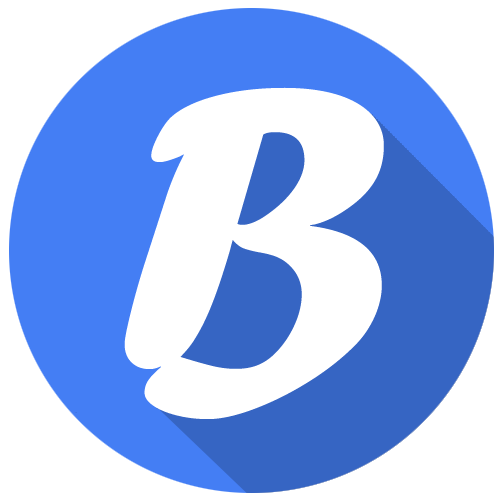
<style>
.page{position:relative;width:500px;height:500px;background:#ffffff}
.page>*{position:absolute;margin:0}
.t1{font:416.7px "ForteMT";letter-spacing:0.1em;color:#ffffff}
</style>
<div class="page">
<p class="t1" style="left:124px;top:87px;width:260px;height:332px">B</p>
</div>
